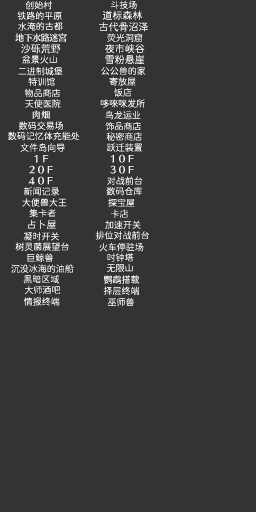
<style>
.page{position:relative;width:256px;height:512px;background:#333333}
.page>*{position:absolute;margin:0}
.t1{font:9px "JiangChengYuanTi-300W";color:#ffffff}
.t2{font:10px "JiangChengYuanTi-300W";color:#ffffff}
.t3{font:9px "JiangChengYuanTi-300W"}
.t4{font:10px "JiangChengYuanTi-300W"}
</style>
<div class="page">
<p class="t1" style="left:25px;top:0px;width:27px;height:10px">创始村</p>
<p class="t1" style="left:110px;top:0px;width:27px;height:9px">斗技场</p>
<p class="t1" style="left:17px;top:11px;width:45px;height:9px">铁路的平原</p>
<p class="t2" style="left:102px;top:10px;width:40px;height:10px">道标森林</p>
<p class="t1" style="left:18px;top:22px;width:45px;height:9px">水淹的古都</p>
<p class="t2" style="left:99px;top:22px;width:49px;height:10px">古代骨沼泽</p>
<p class="t1" style="left:107px;top:33px;width:36px;height:9px">荧光洞窟</p>
<p class="t2" style="left:21px;top:44px;width:40px;height:10px">沙砾荒野</p>
<p class="t2" style="left:105px;top:44px;width:40px;height:10px">夜市峡谷</p>
<p class="t2" style="left:105px;top:54px;width:40px;height:11px">雪粉悬崖</p>
<p class="t1" style="left:22px;top:55px;width:35px;height:9px">盆景火山</p>
<p class="t1" style="left:18px;top:67px;width:45px;height:9px">二进制城堡</p>
<p class="t1" style="left:28px;top:77px;width:27px;height:9px">特训馆</p>
<p class="t1" style="left:101px;top:66px;width:45px;height:9px">公公兽的家</p>
<p class="t1" style="left:109px;top:77px;width:27px;height:9px">寄放屋</p>
<p class="t1" style="left:24px;top:88px;width:37px;height:10px">物品商店</p>
<p class="t1" style="left:114px;top:88px;width:18px;height:9px">饭店</p>
<p class="t1" style="left:25px;top:99px;width:36px;height:9px">天使医院</p>
<p class="t1" style="left:100px;top:99px;width:45px;height:9px">哆唻咪发所</p>
<p class="t1" style="left:105px;top:110px;width:36px;height:10px">鸟龙运业</p>
<p class="t1" style="left:19px;top:121px;width:44px;height:9px">数码交易场</p>
<p class="t1" style="left:105px;top:122px;width:36px;height:9px">饰品商店</p>
<p class="t1" style="left:8px;top:131px;width:72px;height:10px">数码记忆体充能处</p>
<p class="t1" style="left:106px;top:132px;width:36px;height:9px">秘密商店</p>
<p class="t1" style="left:20px;top:143px;width:45px;height:9px">文件岛向导</p>
<p class="t1" style="left:107px;top:143px;width:36px;height:9px">跃迁装置</p>
<p class="t1" style="left:107px;top:176px;width:36px;height:9px">对战前台</p>
<p class="t1" style="left:22px;top:198px;width:45px;height:9px">大便兽大王</p>
<p class="t1" style="left:24px;top:187px;width:35px;height:9px">新闻记录</p>
<p class="t1" style="left:106px;top:187px;width:36px;height:9px">数码仓库</p>
<p class="t1" style="left:108px;top:198px;width:27px;height:9px">探宝屋</p>
<p class="t1" style="left:29px;top:209px;width:27px;height:9px">集卡者</p>
<p class="t3" style="left:111px;top:209px;width:18px;height:9px">卡店</p>
<p class="t4" style="left:28px;top:220px;width:28px;height:10px">占卜屋</p>
<p class="t1" style="left:105px;top:220px;width:36px;height:9px">加速开关</p>
<p class="t3" style="left:23px;top:232px;width:36px;height:9px">凝时开关</p>
<p class="t1" style="left:95px;top:231px;width:54px;height:9px">排位对战前台</p>
<p class="t1" style="left:15px;top:242px;width:54px;height:9px">树灵菌展望台</p>
<p class="t1" style="left:99px;top:243px;width:45px;height:9px">火车停驻场</p>
<p class="t1" style="left:27px;top:253px;width:26px;height:9px">巨鲸兽</p>
<p class="t1" style="left:107px;top:253px;width:27px;height:9px">时钟塔</p>
<p class="t1" style="left:11px;top:264px;width:63px;height:9px">沉没冰海的油船</p>
<p class="t1" style="left:107px;top:263px;width:26px;height:9px">无限山</p>
<p class="t1" style="left:23px;top:275px;width:36px;height:9px">黑暗区域</p>
<p class="t3" style="left:104px;top:275px;width:36px;height:9px">鹦鹉搭载</p>
<p class="t1" style="left:25px;top:285px;width:35px;height:9px">大师酒吧</p>
<p class="t1" style="left:103px;top:286px;width:36px;height:9px">择层终端</p>
<p class="t1" style="left:24px;top:297px;width:36px;height:9px">情报终端</p>
<p class="t1" style="left:108px;top:297px;width:27px;height:10px">巫师兽</p>
</div>
